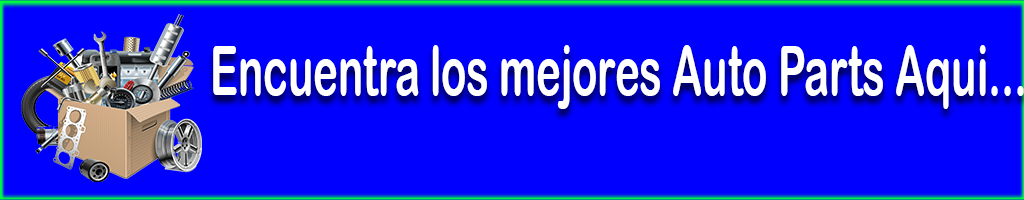
<style>
.page{position:relative;width:1024px;height:200px;background:#0000ff}
.page>*{position:absolute;margin:0}
.t1{font:69.4px "ArialRoundedMTBold";color:#ffffff;scale:0.6 1}
</style>
<div class="page">
<p class="t1" style="left:213px;top:45px;width:811px;height:64px">Encuentra los mejores Auto Parts Aqui...<br><br>Parts Aqui.....</p>
</div>
